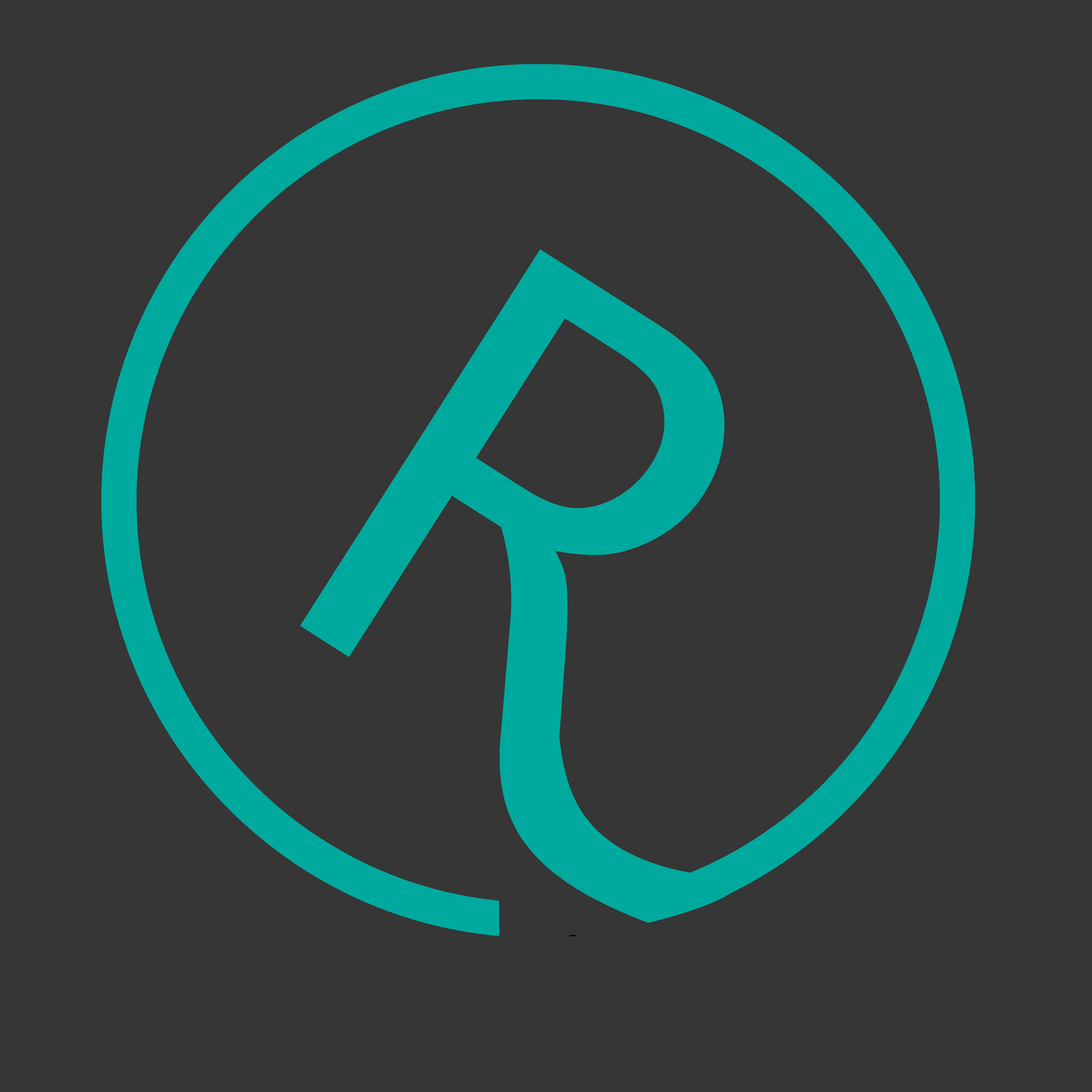
<style>
.page{position:relative;width:1092px;height:1092px;background:#363636}
.page>*{position:absolute;margin:0}
.t1{font:587.8px "Geneva";color:#00a99d}
</style>
<div class="page">
<p class="t1" style="left:300px;top:249px;width:424px;height:540px;rotate:33deg">R</p>
</div>
